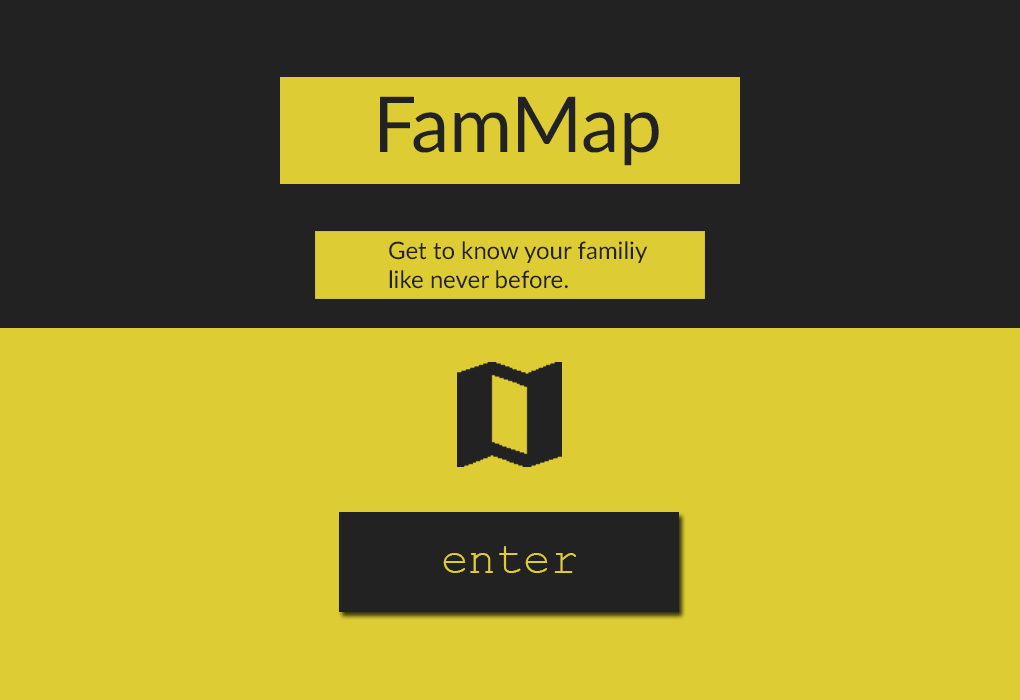
<style>
.page{position:relative;width:1020px;height:700px;background:#ddcc33}
.page>*{position:absolute;margin:0}
.t1{font:76.9px "Lato-Regular";color:#222222}
.t2{font:24px "Lato-Regular";color:#222222}
.t3{font:45.7px "CourierNewPSMT";color:#ddcc33}
</style>
<div class="page">
<p class="t1" style="left:380px;top:96px;width:279px;height:70px">FamMap</p>
<p class="t2" style="left:389px;top:241px;width:259px;height:48px">Get to know your familiy<br>like never before.</p>
<p class="t3" style="left:443px;top:546px;width:133px;height:27px">enter</p>
</div>
